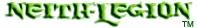
<style>
.page{position:relative;width:197px;height:28px;background:#ffffff}
.page>*{position:absolute;margin:0}
.t1{font:21px "BurningWrath"}
.t2{font:21px "MyriadPro-Regular"}
.t3{font:8px "ArialMT";color:#006600}
</style>
<div class="page">
<p class="t1" style="left:6px;top:1px;width:187px;height:24px">NEITH<span class="t2">-</span>LEGION</p>
<p class="t3" style="left:182px;top:21px;width:12px;height:6px">TM</p>
</div>
